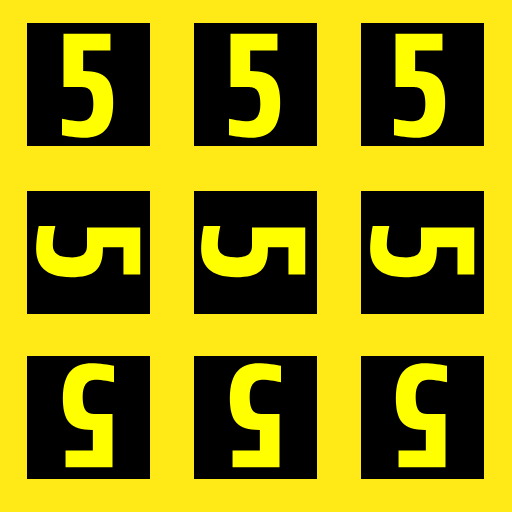
<style>
.page{position:relative;width:512px;height:512px;background:#ffea17}
.page>*{position:absolute;margin:0}
.t1{font:150px "Share-BoldOSF";color:#ffff00}
</style>
<div class="page">
<p class="t1" style="left:62px;top:33px;width:52px;height:105px">5</p>
<p class="t1" style="left:229px;top:33px;width:52px;height:105px">5</p>
<p class="t1" style="left:394px;top:33px;width:52px;height:105px">5</p>
<p class="t1" style="left:36px;top:226px;width:105px;height:52px;rotate:90deg">5</p>
<p class="t1" style="left:201px;top:226px;width:105px;height:52px;rotate:90deg">5</p>
<p class="t1" style="left:370px;top:226px;width:105px;height:52px;rotate:90deg">5</p>
<p class="t1" style="left:62px;top:363px;width:52px;height:105px;rotate:-180deg">5</p>
<p class="t1" style="left:229px;top:363px;width:52px;height:105px;rotate:-180deg">5</p>
<p class="t1" style="left:395px;top:363px;width:52px;height:105px;rotate:-180deg">5</p>
</div>
